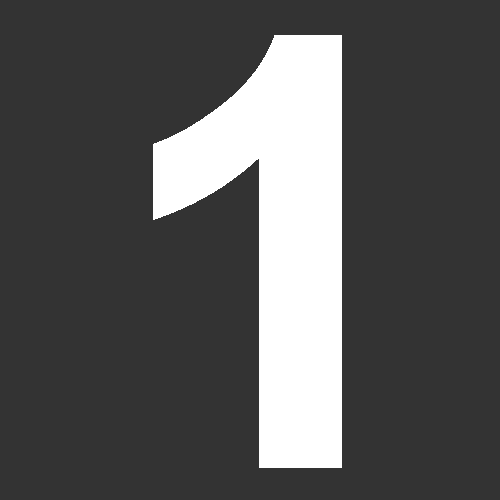
<style>
.page{position:relative;width:500px;height:500px;background:#333333}
.page>*{position:absolute;margin:0}
.t1{font:600px "Arial-BoldMT";color:#ffffff}
</style>
<div class="page">
<p class="t1" style="left:153px;top:35px;width:189px;height:433px">1</p>
</div>
